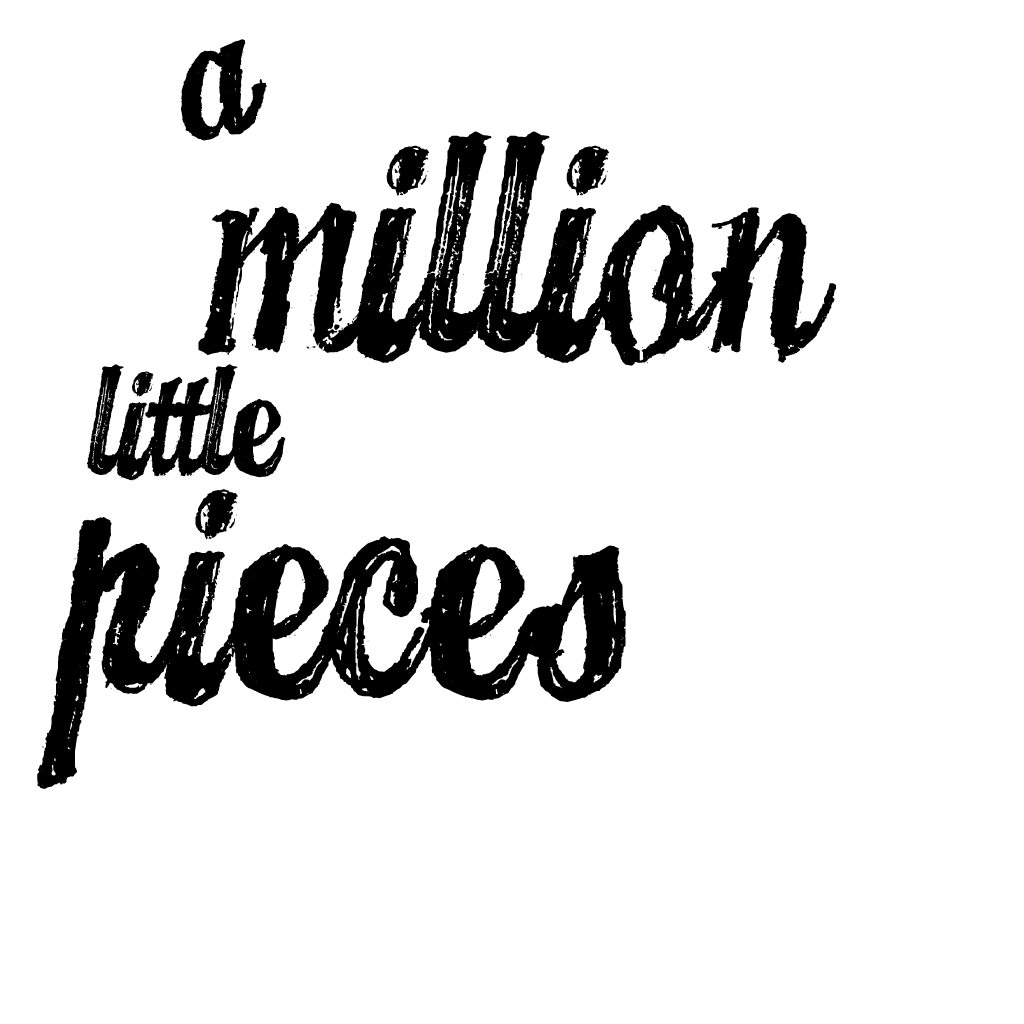
<style>
.page{position:relative;width:1024px;height:1024px;background:#ffffff}
.page>*{position:absolute;margin:0}
.t1{font:300.9px "CANDYINC";color:#000000}
.t2{font:481.4px "CANDYINC";color:#000000}
.t3{font:240.7px "CANDYINC";color:#000000}
</style>
<div class="page">
<p class="t1" style="left:181px;top:39px;width:86px;height:102px;rotate:-8deg">a</p>
<p class="t2" style="left:198px;top:131px;width:638px;height:235px">million</p>
<p class="t3" style="left:87px;top:364px;width:199px;height:117px">little</p>
<p class="t2" style="left:37px;top:489px;width:589px;height:300px">pieces</p>
</div>
